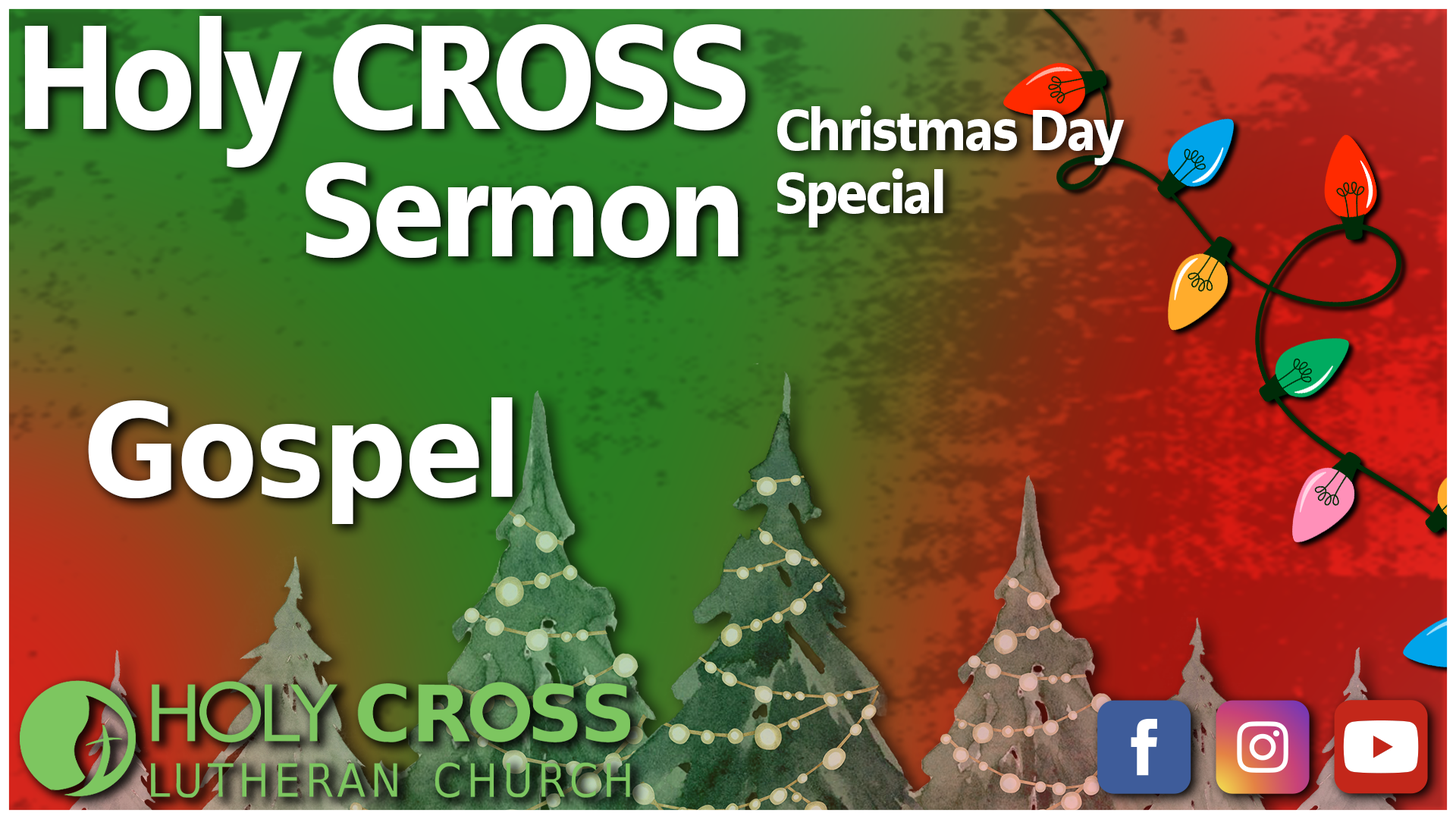
<style>
.page{position:relative;width:1456px;height:819px}
.page>*{position:absolute;margin:0}
.t1{font:147px "PMNCaeciliaSansText-Blk";letter-spacing:-0.025em;color:#ffffff;scale:0.91 1}
.t2{font:57.3px "PMNCaeciliaSansText-Blk";letter-spacing:-0.025em;color:#ffffff;scale:0.91 1}
.t3{font:132.1px "PMNCaeciliaSansText-Blk";letter-spacing:-0.025em;color:#ffffff;scale:0.91 1}
.t4{font:130.2px "DejaVuSans-Bold";letter-spacing:-0.025em;color:#ffffff;scale:0.91 1}
</style>
<div class="page">
<p class="t1" style="left:24px;top:16px;width:721px;height:152px">Holy CROSS</p>
<p class="t2" style="left:777px;top:105px;width:348px;height:122px">Christmas Day<br>Special</p>
<p class="t3" style="left:306px;top:162px;width:433px;height:97px">Sermon</p>
<p class="t4" style="left:88px;top:397px;width:425px;height:127px">Gospel</p>
</div>
